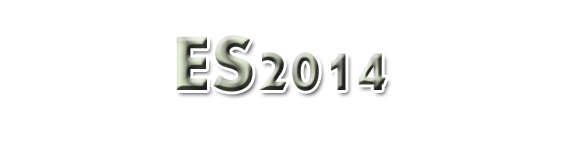
<style>
.page{position:relative;width:567px;height:142px;background:#ffffff}
.page>*{position:absolute;margin:0}
.t1{font:80px "Aharoni-Bold"}
</style>
<div class="page">
<p class="t1" style="left:176px;top:35px;width:210px;height:57px">ES2014</p>
</div>
